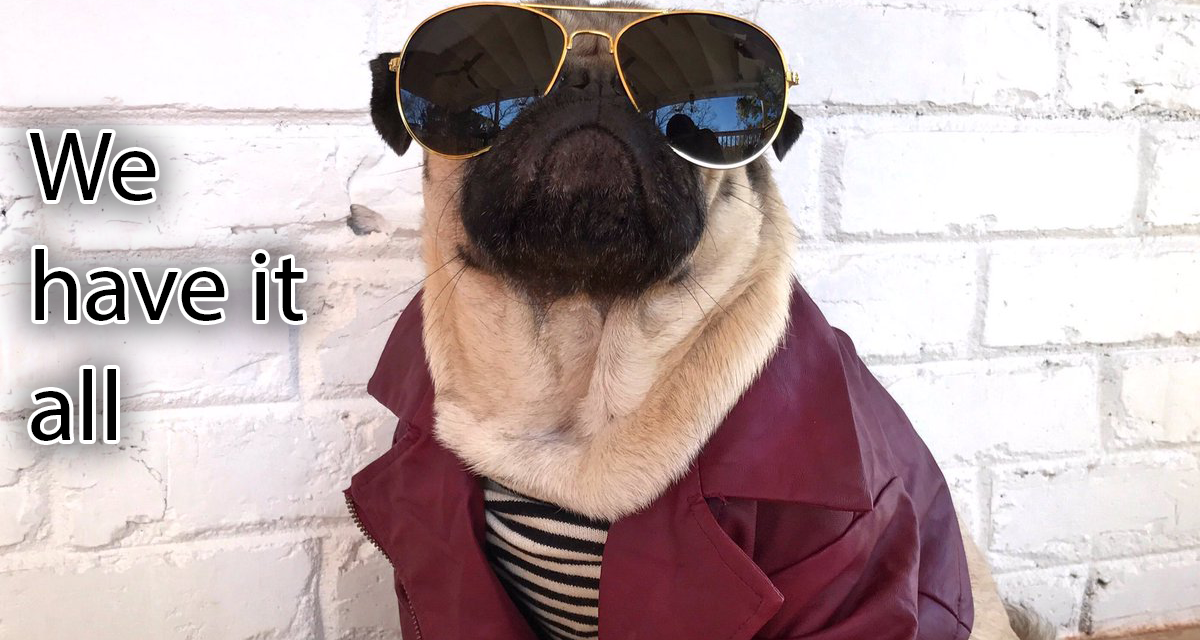
<style>
.page{position:relative;width:1200px;height:640px}
.page>*{position:absolute;margin:0}
.t1{font:100px "MyriadPro-Regular";color:#000000}
</style>
<div class="page">
<p class="t1" style="left:29px;top:133px;width:275px;height:308px">We have it all</p>
</div>
